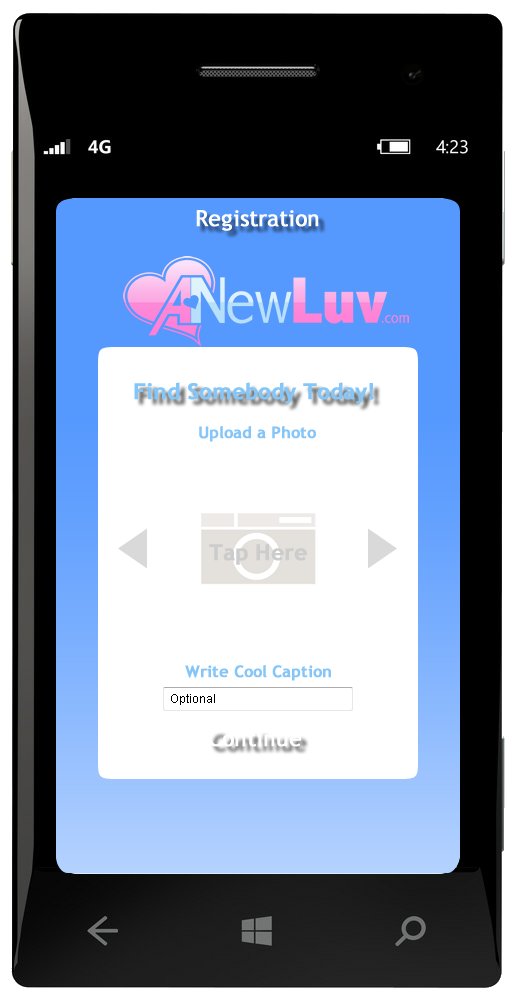
<style>
.page{position:relative;width:515px;height:1000px;background:#ffffff}
.page>*{position:absolute;margin:0}
.t1{font:22px "TrebuchetMS";color:#ffffff;font-weight:bold}
.t2{font:22px "TrebuchetMS-Bold";color:#85c6f8;font-weight:bold}
.t3{font:16px "TrebuchetMS-Bold";color:#85c5f8;font-weight:bold}
.t4{font:22px "TrebuchetMS-Bold";color:#cccccc;font-weight:bold}
</style>
<div class="page">
<p class="t1" style="left:196px;top:210px;width:123px;height:21px">Registration</p>
<p class="t2" style="left:134px;top:382px;width:240px;height:22px">Find Somebody Today!</p>
<p class="t3" style="left:199px;top:426px;width:117px;height:16px">Upload a Photo</p>
<p class="t4" style="left:209px;top:544px;width:98px;height:21px">Tap Here</p>
<p class="t3" style="left:185px;top:665px;width:146px;height:16px">Write Cool Caption</p>
<p class="t1" style="left:208px;top:730px;width:94px;height:17px">Continue</p>
</div>
